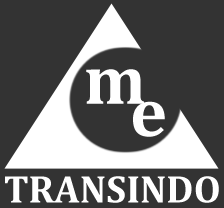
<style>
.page{position:relative;width:224px;height:208px;background:#333333}
.page>*{position:absolute;margin:0}
.t1{font:70px "Cambria-Bold";color:#ffffff}
.t2{font:39px "Cambria-Bold";color:#ffffff}
</style>
<div class="page">
<p class="t1" style="left:86px;top:69px;width:58px;height:35px">m</p>
<p class="t1" style="left:133px;top:101px;width:32px;height:36px">e</p>
<p class="t2" style="left:5px;top:176px;width:214px;height:27px">TRANSINDO</p>
</div>
